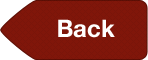
<style>
.page{position:relative;width:148px;height:60px;background:#80160a}
.page>*{position:absolute;margin:0}
.t1{font:24px "HelveticaNeue-Bold";color:#ffffff}
</style>
<div class="page">
<p class="t1" style="left:58px;top:19px;width:57px;height:19px">Back</p>
</div>
